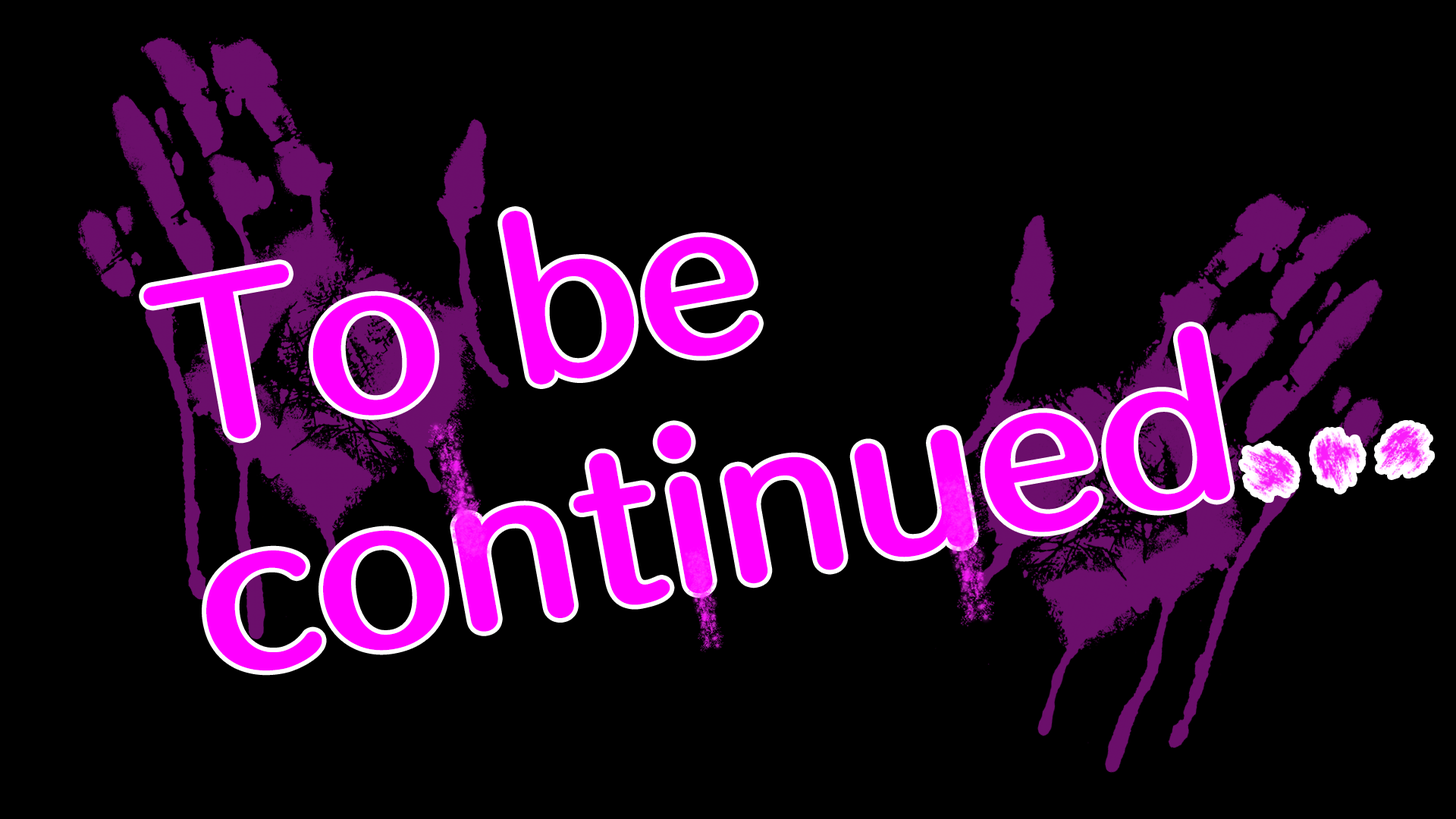
<style>
.page{position:relative;width:1456px;height:819px;background:#000000}
.page>*{position:absolute;margin:0}
.t1{font:194.1px "HummingStd-B";color:#ff00ff}
</style>
<div class="page">
<p class="t1" style="left:143px;top:211px;width:1088px;height:460px;text-align:right;rotate:-10deg">To be<br>continued</p>
</div>
